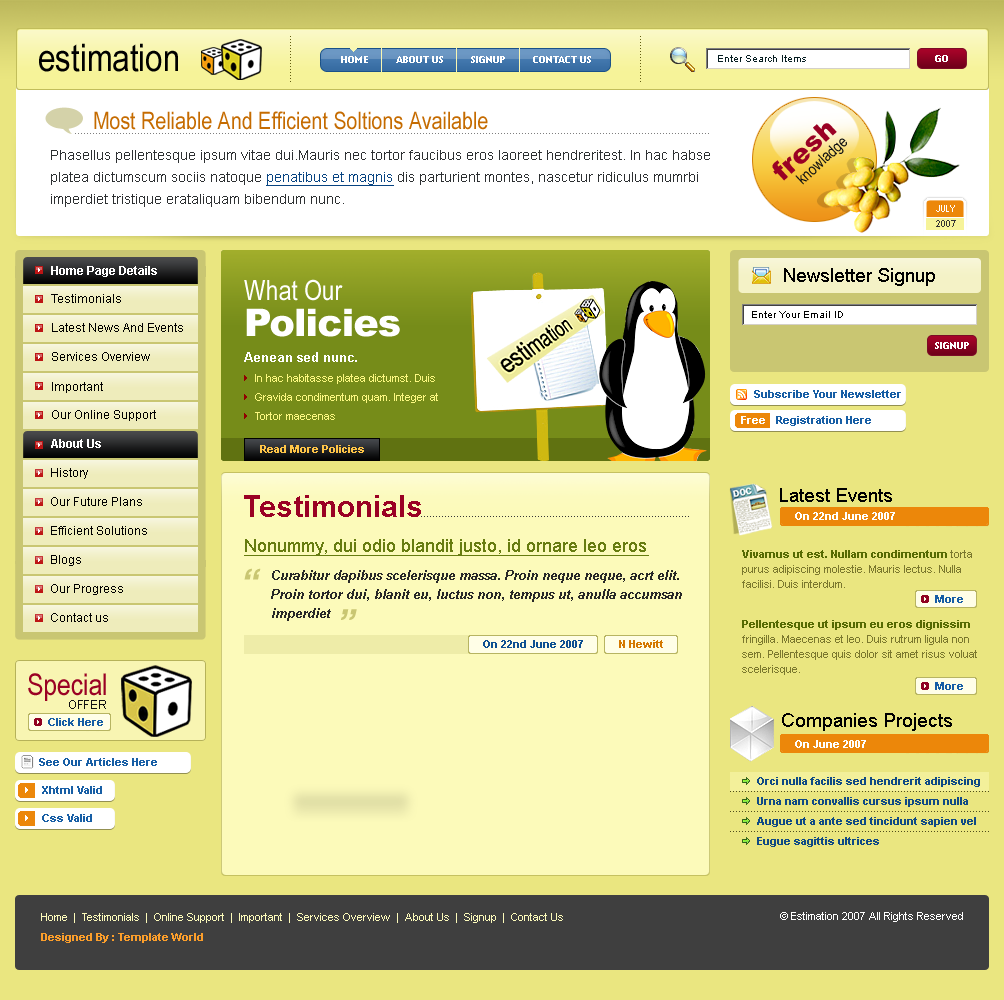
<style>
.page{position:relative;width:1004px;height:1000px;background:#eae680}
.page>*{position:absolute;margin:0}
.t1{font:38px "ArialNarrow";color:#000000}
.t2{font:10px "TrebuchetMS-Bold";color:#ffffff;text-transform:uppercase}
.t3{font:10px "ArialMT";color:#071e22}
.t4{font:24px "ArialNarrow";color:#c56b00}
.t5{font:27px "Arial-Black";color:#9a0124}
.t6{font:14px/22px "ArialMT";color:#2d3032}
.t7{font:14px/22px "ArialMT";color:#084482;text-decoration:underline}
.t8{font:16px "ArialNarrow";color:#111213}
.t9{font:8px "Standard0757";color:#ffffff;text-transform:uppercase}
.t10{font:10px "TrebuchetMS";color:#333333}
.t11{font:12px "Arial-BoldMT";color:#ffffff}
.t12{font:19px "ArialMT";color:#000000}
.t13{font:28px/18px "ArialNarrow";color:#ffffff}
.t14{font:38px/18px "Arial-Black";letter-spacing:-0.025em;color:#ffffff}
.t15{font:12px/14px "ArialMT";color:#000000}
.t16{font:12px/15px "ArialMT";color:#000000}
.t17{font:10px "ArialMT";color:#000000}
.t18{font:13px "Arial-BoldMT";color:#ffffff}
.t19{font:11px/19px "ArialMT";color:#fcf881}
.t20{font:12px "ArialMT";color:#000000}
.t21{font:11px "Arial-BoldMT";color:#175ea5}
.t22{font:11px "Arial-BoldMT";color:#ffffff}
.t23{font:11px "Arial-BoldMT";color:#ffc547}
.t24{font:12px/29px "ArialMT";color:#000000}
.t25{font:30px "Arial-BoldMT";color:#9a0124}
.t26{font:18px "ArialMT";color:#677c10;text-decoration:underline}
.t27{font:11px/15px "ArialMT";color:#7b782e}
.t28{font:11px/15px "Arial-BoldMT";color:#566a02}
.t29{font:37px "Arial-BoldItalicMT";color:#c9c672}
.t30{font:13px/19px "Arial-BoldItalicMT";color:#282828}
.t31{font:13px/19px "Arial-BoldItalicMT";color:#267785}
.t32{font:11px "Arial-BoldMT";color:#0e5092}
.t33{font:11px "Arial-BoldMT";color:#d47800}
.t34{font:30px "ArialNarrow";color:#9a0124}
.t35{font:12px "ArialMT";letter-spacing:-0.025em;color:#101010;text-transform:uppercase}
.t36{font:11px/20px "Arial-BoldMT";color:#104a85}
.t37{font:11px "ArialMT";color:#fcfaba}
.t38{font:11px "ArialMT";color:#ffffff}
.t39{font:11px "Arial-BoldMT";color:#fb9e2b}
</style>
<div class="page">
<p class="t1" style="left:39px;top:43px;width:139px;height:29px">estimation</p>
<p class="t2" style="left:341px;top:56px;width:250px;height:7px">Home         About Us         Signup         Contact Us</p>
<p class="t3" style="left:718px;top:55px;width:88px;height:7px">Enter Search Items</p>
<p class="t2" style="left:935px;top:55px;width:13px;height:7px">go</p>
<p class="t4" style="left:94px;top:111px;width:394px;height:19px">Most Reliable And Efficient Soltions Available</p>
<p class="t5" style="left:772px;top:123px;width:65px;height:58px;rotate:-43deg">fresh</p>
<p class="t6" style="left:51px;top:150px;width:659px;height:57px">Phasellus pellentesque ipsum vitae dui.Mauris nec tortor faucibus eros laoreet hendreritest. In hac habse platea dictumscum sociis natoque <span class="t7">penatibus et magnis</span> dis parturient montes, nascetur ridiculus mumrbi imperdiet tristique erataliquam bibendum nunc.</p>
<p class="t8" style="left:795px;top:138px;width:52px;height:47px;rotate:-43deg">knowladge</p>
<p class="t9" style="left:936px;top:205px;width:19px;height:7px">July</p>
<p class="t10" style="left:936px;top:220px;width:20px;height:7px">2007</p>
<p class="t11" style="left:51px;top:266px;width:106px;height:11px">Home Page Details</p>
<p class="t12" style="left:784px;top:268px;width:151px;height:18px">Newsletter Signup</p>
<p class="t13" style="left:244px;top:279px;width:156px;height:58px">What Our <br><br><span class="t14">Policies</span></p>
<p class="t15" style="left:51px;top:294px;width:132px;height:67px"><span class="t16"><br><br>Testimonials<br><br></span>Latest News And Events<br><br>Services Overview</p>
<p class="t17" style="left:752px;top:311px;width:91px;height:7px">Enter Your Email ID</p>
<p class="t2" style="left:935px;top:342px;width:34px;height:7px">Signup</p>
<p class="t18" style="left:244px;top:352px;width:113px;height:10px">Aenean sed nunc.</p>
<p class="t19" style="left:255px;top:374px;width:183px;height:46px">In hac habitasse platea dictumst. Duis Gravida condimentum quam. Integer at Tortor maecenas</p>
<p class="t20" style="left:52px;top:382px;width:51px;height:11px">Important</p>
<p class="t21" style="left:754px;top:390px;width:147px;height:8px">Subscribe Your Newsletter</p>
<p class="t20" style="left:52px;top:410px;width:104px;height:11px">Our Online Support</p>
<p class="t22" style="left:741px;top:416px;width:24px;height:8px">Free</p>
<p class="t21" style="left:776px;top:416px;width:95px;height:10px">Registration Here</p>
<p class="t11" style="left:51px;top:439px;width:50px;height:9px">About Us</p>
<p class="t23" style="left:260px;top:445px;width:104px;height:8px">Read More Policies</p>
<p class="t24" style="left:51px;top:468px;width:96px;height:154px">History<br>Our Future Plans<br>Efficient Solutions<br>Blogs<br>Our Progress<br>Contact us</p>
<p class="t25" style="left:244px;top:495px;width:177px;height:22px">Testimonials</p>
<p class="t12" style="left:780px;top:488px;width:112px;height:14px">Latest Events</p>
<p class="t22" style="left:795px;top:512px;width:100px;height:8px">On 22nd June 2007</p>
<p class="t26" style="left:244px;top:539px;width:405px;height:17px">Nonummy, dui odio blandit justo, id ornare leo eros</p>
<p class="t27" style="left:742px;top:550px;width:235px;height:125px"><span class="t28">Vivamus ut est. Nullam condimentum </span>torta purus adipiscing molestie. Mauris lectus. Nulla facilisi. Duis interdum. <br><br><span class="t28"><br><br>Pellentesque ut ipsum eu eros dignissim</span> fringilla. Maecenas et leo. Duis rutrum ligula non sem. Pellentesque quis dolor sit amet risus voluat scelerisque.</p>
<p class="t29" style="left:244px;top:568px;width:17px;height:12px">“</p>
<p class="t30" style="left:271px;top:570px;width:411px;height:51px"><span class="t31"><br><br></span>Curabitur dapibus scelerisque massa. Proin neque neque, acrt elit. Proin tortor dui, blanit eu, luctus non, tempus ut, anulla accumsan imperdiet</p>
<p class="t21" style="left:935px;top:595px;width:28px;height:8px">More</p>
<p class="t29" style="left:341px;top:609px;width:16px;height:11px;rotate:180deg">“</p>
<p class="t32" style="left:483px;top:640px;width:100px;height:8px">On 22nd June 2007</p>
<p class="t33" style="left:619px;top:640px;width:44px;height:8px">N Hewitt</p>
<p class="t34" style="left:28px;top:673px;width:78px;height:28px">Special</p>
<p class="t21" style="left:935px;top:682px;width:28px;height:8px">More</p>
<p class="t35" style="left:69px;top:700px;width:37px;height:9px">offer</p>
<p class="t12" style="left:782px;top:713px;width:170px;height:18px">Companies Projects</p>
<p class="t21" style="left:48px;top:718px;width:55px;height:8px">Click Here</p>
<p class="t22" style="left:795px;top:740px;width:71px;height:8px">On June 2007</p>
<p class="t21" style="left:39px;top:758px;width:118px;height:8px">See Our Articles Here</p>
<p class="t36" style="left:757px;top:777px;width:223px;height:70px">Orci nulla facilis sed hendrerit adipiscing Urna nam convallis cursus ipsum nulla Augue ut a ante sed tincidunt sapien vel Eugue sagittis ultrices</p>
<p class="t21" style="left:42px;top:786px;width:60px;height:8px">Xhtml Valid</p>
<p class="t21" style="left:42px;top:814px;width:50px;height:8px">Css Valid</p>
<p class="t37" style="left:41px;top:913px;width:522px;height:10px">Home  |  Testimonials  |  Online Support  |  Important  |  Services Overview  |  About Us  |  Signup  |  Contact Us</p>
<p class="t38" style="left:780px;top:912px;width:183px;height:10px">© Estimation 2007 All Rights Reserved</p>
<p class="t39" style="left:41px;top:933px;width:162px;height:10px">Designed By : Template World</p>
</div>
